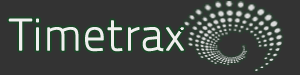
<style>
.page{position:relative;width:300px;height:75px;background:#333333}
.page>*{position:absolute;margin:0}
.t1{font:44px "TitilliumText22L-1wt";color:#f1efef;font-weight:bold}
</style>
<div class="page">
<p class="t1" style="left:8px;top:18px;width:176px;height:34px">Timetrax</p>
</div>
